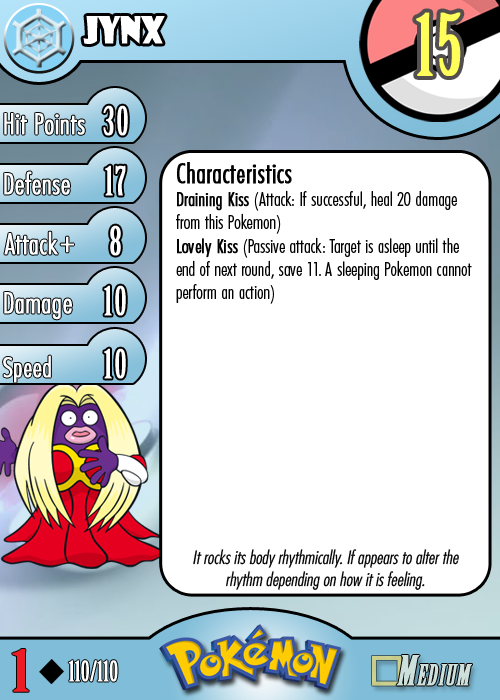
<style>
.page{position:relative;width:500px;height:700px;background:#ffffff}
.page>*{position:absolute;margin:0}
.t1{font:36.7px "ShowcardGothic-Reg";letter-spacing:-0.025em;color:#ffffff;scale:0.91 1}
.t2{font:83.3px "BirchStd";letter-spacing:0.025em;color:#fffd59;font-weight:bold}
.t3{font:27.8px "Futura-CondensedLight";color:#ffffff;font-weight:bold}
.t4{font:38.9px "BirchStd";letter-spacing:0.035em;color:#ffffff;font-weight:bold}
.t5{font:19.4px "FuturaCondensedBQ-Light";color:#010101}
.t6{font:27.8px "FuturaCondensedBQ-Light";color:#010101;font-weight:bold}
.t7{font:19.4px "FuturaCondensedBQ-Light";color:#010101;font-weight:bold}
.t8{font:30.6px "Futura-CondensedLight";color:#ffffff;font-weight:bold}
.t9{font:27.8px "FuturaCondensedBQ-Light";color:#ffffff;font-weight:bold}
.t10{font:18.1px "Futura-CondensedLight";color:#010101;font-style:italic}
.t11{font:55.6px "BirchStd";color:#ed1c24;font-weight:bold;scale:1.5 1}
.t12{font:27.8px "BirchStd";color:#ffffff;font-weight:bold}
</style>
<div class="page">
<p class="t1" style="left:83px;top:16px;width:82px;height:28px">jynx</p>
<p class="t2" style="left:416px;top:12px;width:45px;height:64px">15</p>
<p class="t3" style="left:4px;top:113px;width:81px;height:22px">Hit Points</p>
<p class="t4" style="left:103px;top:105px;width:25px;height:31px">30</p>
<p class="t3" style="left:4px;top:171px;width:66px;height:24px">Defense</p>
<p class="t4" style="left:105px;top:165px;width:21px;height:31px">17</p>
<p class="t5" style="left:176px;top:162px;width:296px;height:142px"><span class="t6">Characteristics<br></span><span class="t7">Draining Kiss</span> (Attack: If successful, heal 20 damage from this Pokemon)<br><span class="t7">Lovely Kiss</span> (Passive attack: Target is asleep until the end of next round, save 11. A sleeping Pokemon cannot perform an action)</p>
<p class="t3" style="left:4px;top:231px;width:54px;height:24px">Attack</p>
<p class="t4" style="left:110px;top:225px;width:11px;height:31px">8</p>
<p class="t8" style="left:60px;top:236px;width:14px;height:17px">+</p>
<p class="t3" style="left:4px;top:292px;width:68px;height:28px">Damage</p>
<p class="t4" style="left:104px;top:285px;width:22px;height:31px">10</p>
<p class="t4" style="left:104px;top:348px;width:22px;height:31px">10</p>
<p class="t9" style="left:3px;top:355px;width:48px;height:28px">Speed</p>
<p class="t10" style="left:193px;top:549px;width:266px;height:41px;text-align:center">It rocks its body rhythmically. If appears to alter the rhythm depending on how it is feeling.</p>
<p class="t11" style="left:12px;top:649px;width:17px;height:43px">1</p>
<p class="t12" style="left:68px;top:660px;width:50px;height:22px">110/110</p>
</div>
